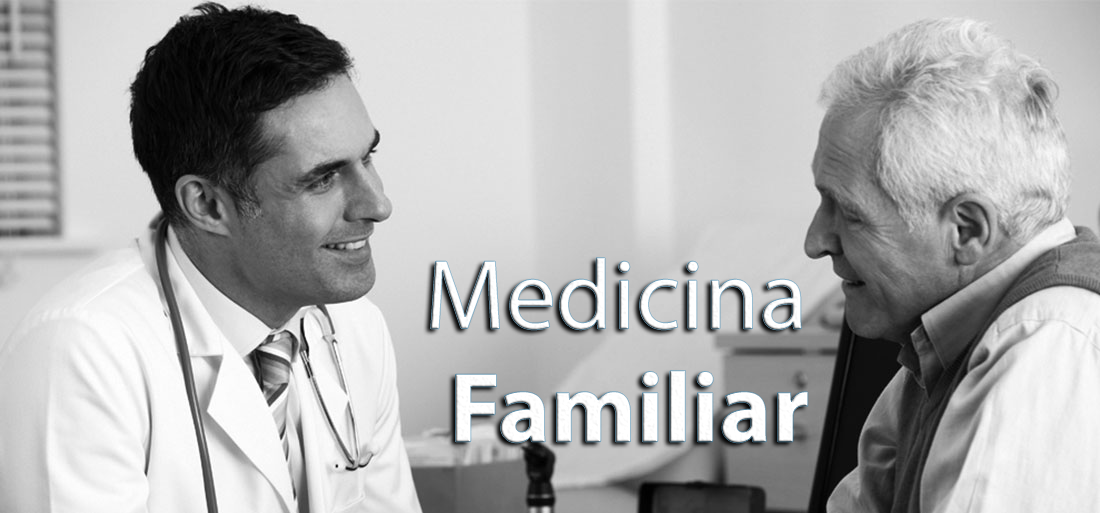
<style>
.page{position:relative;width:1100px;height:513px}
.page>*{position:absolute;margin:0}
.t1{font:100px "MyriadPro-Regular";color:#ffffff}
.t2{font:100px "MyriadPro-Bold";color:#ffffff}
</style>
<div class="page">
<p class="t1" style="left:430px;top:257px;width:372px;height:73px">Medicina</p>
<p class="t2" style="left:455px;top:370px;width:353px;height:73px">Familiar</p>
</div>
